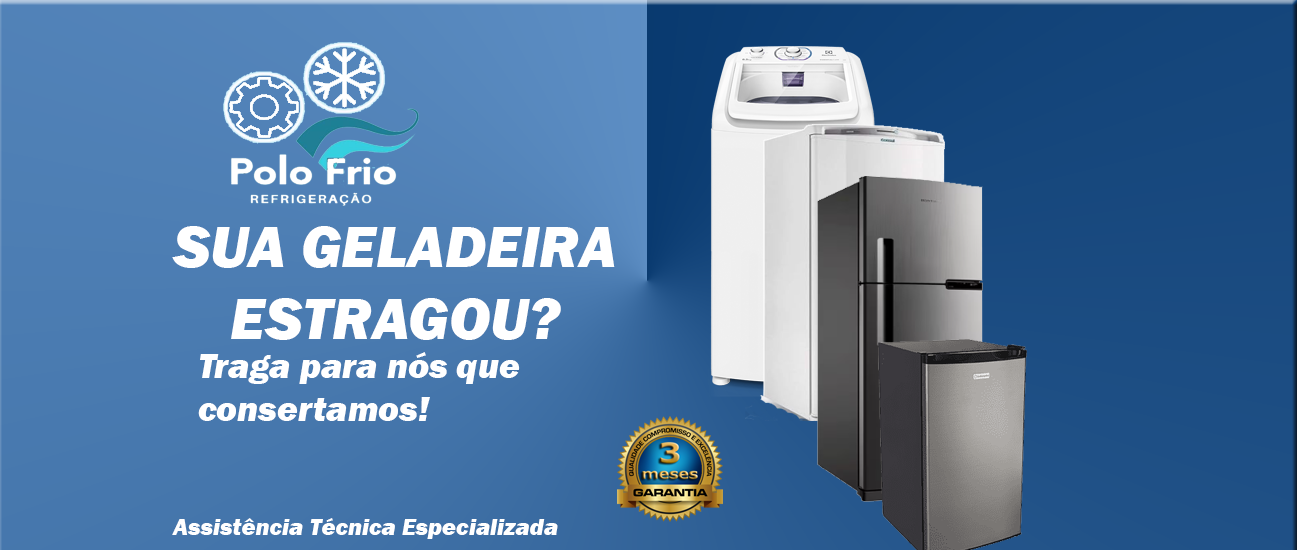
<style>
.page{position:relative;width:1300px;height:550px}
.page>*{position:absolute;margin:0}
.t1{font:60px "FranklinGothic-HeavyItalic";color:#ffffff}
.t2{font:36px "FranklinGothic-HeavyItalic";color:#ffffff}
.t3{font:24px "FranklinGothic-HeavyItalic";color:#ffffff}
</style>
<div class="page">
<p class="t1" style="left:172px;top:226px;width:443px;height:114px;text-align:center">SUA GELADEIRA ESTRAGOU?</p>
<p class="t2" style="left:198px;top:352px;width:322px;height:69px">Traga para nós que consertamos!</p>
<p class="t3" style="left:172px;top:518px;width:386px;height:21px">Assistência Técnica Especializada</p>
</div>
